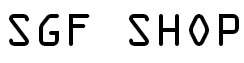
<style>
.page{position:relative;width:244px;height:63px;background:#ffffff}
.page>*{position:absolute;margin:0}
.t1{font:41.7px "OCRAStd";color:#000000}
</style>
<div class="page">
<p class="t1" style="left:9px;top:14px;width:230px;height:32px">SGF SHOP</p>
</div>
